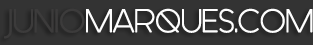
<style>
.page{position:relative;width:313px;height:45px;background:#333333}
.page>*{position:absolute;margin:0}
.t1{font:32px "Generica";letter-spacing:-0.01em;color:#fefefe;text-transform:uppercase;font-weight:bold}
.t2{font:32px "Generica";letter-spacing:-0.01em;color:#3c3b3b;text-transform:uppercase;font-weight:bold}
</style>
<div class="page">
<p class="t1" style="left:4px;top:8px;width:309px;height:31px"><span class="t2">junio</span>marques.com</p>
</div>
